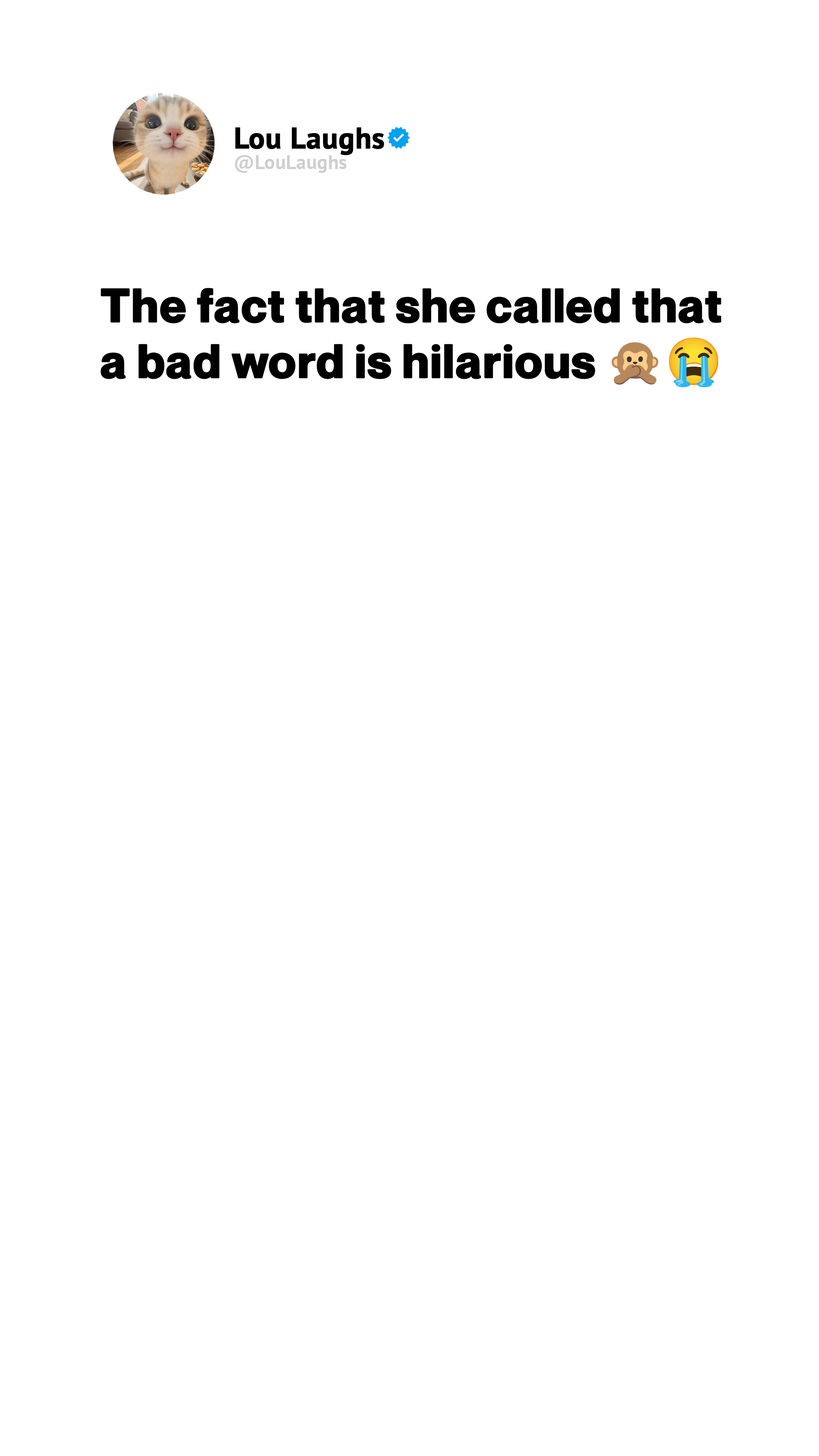
<style>
.page{position:relative;width:819px;height:1456px;background:#ffffff}
.page>*{position:absolute;margin:0}
.t1{font:29.6px "PTSans-Bold";color:#000000;font-weight:bold}
.t2{font:19.7px "PTSans-Bold";letter-spacing:0.01em;color:#cfcfcf}
.t3{font:46.3px "NeueMontreal-Bold";letter-spacing:0.01em;color:#000000;font-weight:bold}
.t4{font:46.3px "NotoColorEmoji-SVG";letter-spacing:0.01em;color:#000000;font-weight:bold}
</style>
<div class="page">
<p class="t1" style="left:235px;top:127px;width:149px;height:28px">Lou Laughs</p>
<p class="t2" style="left:235px;top:155px;width:112px;height:18px">@LouLaughs</p>
<p class="t3" style="left:100px;top:288px;width:621px;height:100px;text-align:center">The fact that she called that<br>a bad word is hilarious <span class="t4">🙊😭</span></p>
</div>
